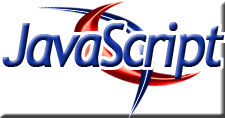
<style>
.page{position:relative;width:225px;height:118px;background:#ffffff}
.page>*{position:absolute;margin:0}
.t1{font:60px "TrebuchetMS-Italic";letter-spacing:-0.08em;font-weight:bold;scale:0.88 1}
</style>
<div class="page">
<p class="t1" style="left:2px;top:22px;width:223px;height:57px">JavaScript</p>
</div>
